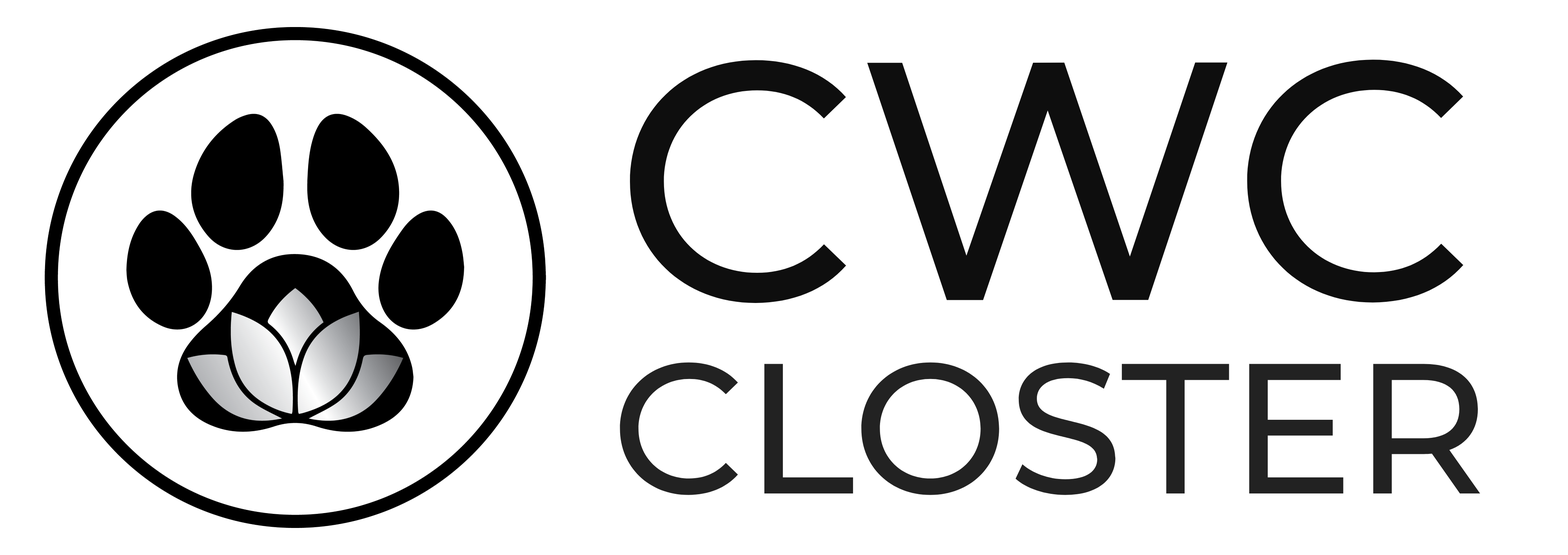
<style>
.page{position:relative;width:1568px;height:555px;background:#ffffff}
.page>*{position:absolute;margin:0}
.t1{font:339.1px "Montserrat-Medium";color:#0e0e0e}
.t2{font:185.1px "Montserrat-Medium";color:#222222}
</style>
<div class="page">
<p class="t1" style="left:630px;top:60px;width:833px;height:243px">CWC</p>
<p class="t2" style="left:620px;top:362px;width:860px;height:133px">CLOSTER</p>
</div>
